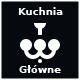
<style>
.page{position:relative;width:80px;height:80px;background:#06090d}
.page>*{position:absolute;margin:0}
.t1{font:10px "DejaVuSans-Bold";color:#fdfdfd}
.t2{font:10px "DejaVuSans-Bold";color:#ffffff}
</style>
<div class="page">
<p class="t1" style="left:18px;top:7px;width:45px;height:8px">Kuchnia</p>
<p class="t2" style="left:19px;top:65px;width:42px;height:8px">Główne</p>
</div>
